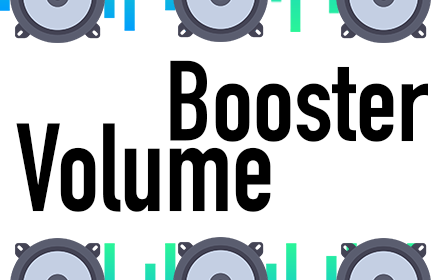
<style>
.page{position:relative;width:440px;height:280px;background:#ffffff}
.page>*{position:absolute;margin:0}
.t1{font:111.7px "DINCondensed-Bold";color:#000000}
.t2{font:123px "DINCondensed-Bold";color:#000000;scale:0.92 1}
</style>
<div class="page">
<p class="t1" style="left:170px;top:60px;width:258px;height:82px">Booster</p>
<p class="t2" style="left:16px;top:123px;width:255px;height:89px">Volume</p>
</div>
